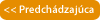
<style>
.page{position:relative;width:100px;height:20px;background:#e68d00}
.page>*{position:absolute;margin:0}
.t1{font:11px "MyriadPro-Semibold";color:#ffffff}
</style>
<div class="page">
<p class="t1" style="left:4px;top:5px;width:90px;height:11px">&lt;&lt; Predchádzajúca</p>
</div>
